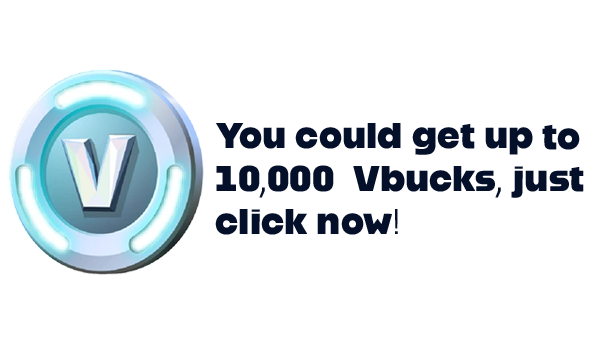
<style>
.page{position:relative;width:600px;height:360px;background:#ffffff}
.page>*{position:absolute;margin:0}
.t1{font:35.7px "Alfarn2";color:#04102a}
</style>
<div class="page">
<p class="t1" style="left:215px;top:123px;width:369px;height:112px">You could get up to <br>10,000  Vbucks, just<br>click now!</p>
</div>
